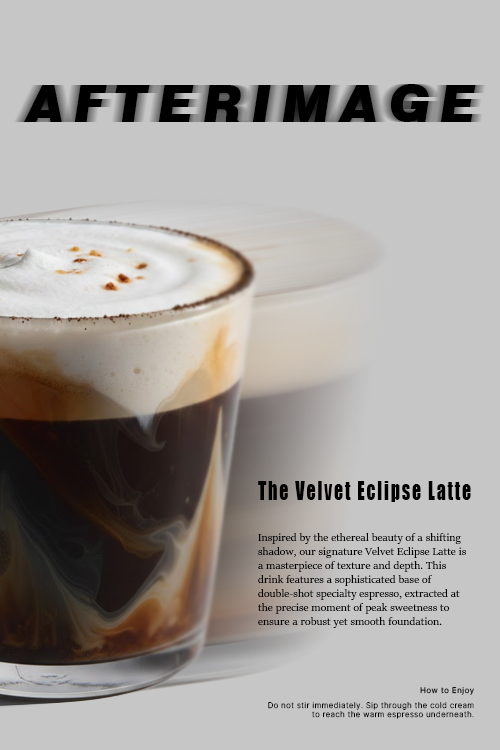
<style>
.page{position:relative;width:500px;height:750px;background:#c6c6c6}
.page>*{position:absolute;margin:0}
.t1{font:52px "Swiss721BT-BlackItalic";letter-spacing:0.2em;color:#000000;text-transform:uppercase}
.t2{font:24.2px "Impact";letter-spacing:0.1em;color:#000000;scale:0.74 1}
.t3{font:12px/14px "SitkaBanner";letter-spacing:0.01em;color:#000000}
.t4{font:8px/15px "Pretendard-ExtraLight";letter-spacing:0.075em;color:#000000}
.t5{font:8px/14.4px "Pretendard-Regular";letter-spacing:0.075em;color:#000000}
.t6{font:8px/9.6px "Pretendard-ExtraLight";letter-spacing:0.075em;color:#000000}
</style>
<div class="page">
<p class="t1" style="left:24px;top:84px;width:452px;height:38px">afterimage</p>
<p class="t2" style="left:258px;top:481px;width:213px;height:21px">The Velvet Eclipse Latte</p>
<p class="t3" style="left:258px;top:533px;width:208px;height:95px">Inspired by the ethereal beauty of a shifting shadow, our signature Velvet Eclipse Latte is a masterpiece of texture and depth. This drink features a sophisticated base of double-shot specialty espresso, extracted at the precise moment of peak sweetness to ensure a robust yet smooth foundation.</p>
<p class="t4" style="left:268px;top:687px;width:206px;height:32px;text-align:right"><span class="t5">How to Enjoy<br></span>Do not stir immediately. Sip through the cold cream <span class="t6">to reach the warm espresso underneath.</span></p>
</div>
